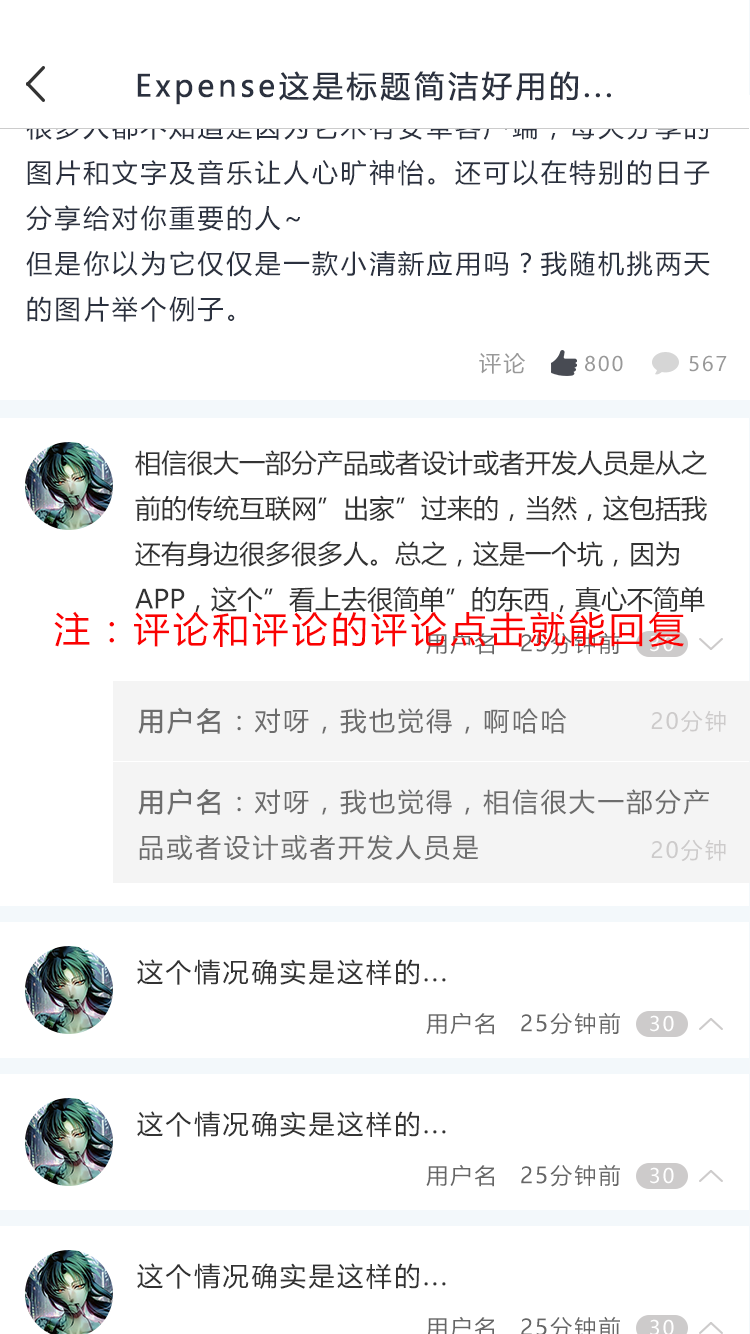
<style>
.page{position:relative;width:750px;height:1334px;background:#ffffff}
.page>*{position:absolute;margin:0}
.t1{font:30px "MicrosoftYaHei";letter-spacing:0.1em;color:#2b313f;font-weight:bold}
.t2{font:26px "MicrosoftYaHei";letter-spacing:0.1em;color:#2b313f}
.t3{font:22px "MicrosoftYaHei";letter-spacing:0.1em;color:#999999}
.t4{font:20px "MicrosoftYaHei";letter-spacing:0.1em;color:#999999}
.t5{font:26px "MicrosoftYaHei";color:#333333}
.t6{font:36px "MicrosoftYaHei";letter-spacing:0.1em;color:#fa0202}
.t7{font:22px "MicrosoftYaHei";letter-spacing:0.1em;color:#666666}
.t8{font:20px "MicrosoftYaHei";letter-spacing:0.1em;color:#ffffff}
.t9{font:26px "MicrosoftYaHei";letter-spacing:0.1em;color:#6d6d6d}
.t10{font:26px "MicrosoftYaHei";letter-spacing:0.1em;color:#6d6d6d;font-weight:bold}
.t11{font:22px "MicrosoftYaHei";letter-spacing:0.1em;color:#cdcbcb}
.t12{font:26px "MicrosoftYaHei";letter-spacing:0.1em;color:#333333}
</style>
<div class="page">
<p class="t1" style="left:137px;top:71px;width:474px;height:34px">Expense这是标题简洁好用的...</p>
<p class="t2" style="left:26px;top:114px;width:684px;height:208px">很多人都不知道是因为它木有安卓客户端，每天分享的图片和文字及音乐让人心旷神怡。还可以在特别的日子分享给对你重要的人~<br>但是你以为它仅仅是一款小清新应用吗？我随机挑两天的图片举个例子。</p>
<p class="t3" style="left:479px;top:353px;width:46px;height:21px">评论</p>
<p class="t4" style="left:585px;top:355px;width:38px;height:17px">800</p>
<p class="t4" style="left:689px;top:355px;width:38px;height:17px">567</p>
<p class="t5" style="left:135px;top:450px;width:572px;height:162px">相信很大一部分产品或者设计或者开发人员是从之前的传统互联网”出家”过来的，当然，这包括我还有身边很多很多人。总之，这是一个坑，因为APP，这个”看上去很简单”的东西，真心不简单</p>
<p class="t6" style="left:54px;top:611px;width:630px;height:36px">注：评论和评论的评论点击就能回复</p>
<p class="t7" style="left:426px;top:632px;width:68px;height:23px">用户名</p>
<p class="t7" style="left:521px;top:632px;width:99px;height:23px">25分钟前</p>
<p class="t8" style="left:650px;top:635px;width:24px;height:17px">30</p>
<p class="t9" style="left:138px;top:707px;width:429px;height:27px"><span class="t10">用户名</span>：对呀，我也觉得，啊哈哈</p>
<p class="t11" style="left:651px;top:710px;width:75px;height:23px">20分钟</p>
<p class="t9" style="left:138px;top:788px;width:571px;height:73px"><span class="t10">用户名</span>：对呀，我也觉得，相信很大一部分产<br>品或者设计或者开发人员是</p>
<p class="t11" style="left:651px;top:839px;width:75px;height:23px">20分钟</p>
<p class="t12" style="left:137px;top:959px;width:309px;height:26px">这个情况确实是这样的...</p>
<p class="t7" style="left:426px;top:1012px;width:68px;height:23px">用户名</p>
<p class="t7" style="left:521px;top:1012px;width:99px;height:23px">25分钟前</p>
<p class="t8" style="left:650px;top:1015px;width:24px;height:17px">30</p>
<p class="t12" style="left:137px;top:1111px;width:309px;height:26px">这个情况确实是这样的...</p>
<p class="t7" style="left:426px;top:1164px;width:68px;height:23px">用户名</p>
<p class="t7" style="left:521px;top:1164px;width:99px;height:23px">25分钟前</p>
<p class="t8" style="left:650px;top:1167px;width:24px;height:17px">30</p>
<p class="t12" style="left:137px;top:1263px;width:309px;height:26px">这个情况确实是这样的...</p>
<p class="t8" style="left:650px;top:1319px;width:24px;height:17px">30</p>
</div>
